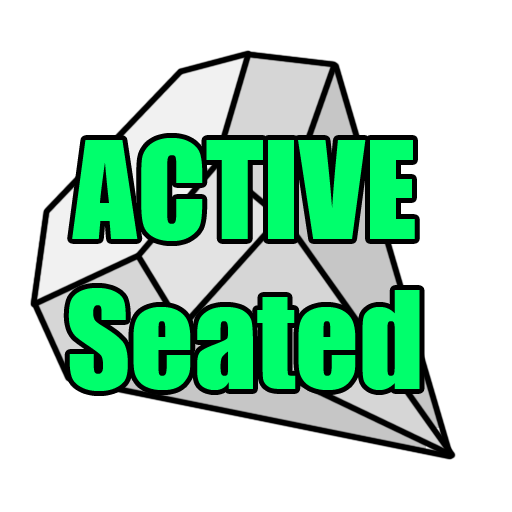
<style>
.page{position:relative;width:512px;height:512px;background:#ffffff}
.page>*{position:absolute;margin:0}
.t1{font:125px "Impact";color:#00ff6c}
</style>
<div class="page">
<p class="t1" style="left:68px;top:138px;width:352px;height:253px;text-align:center">ACTIVE<br>Seated</p>
</div>
